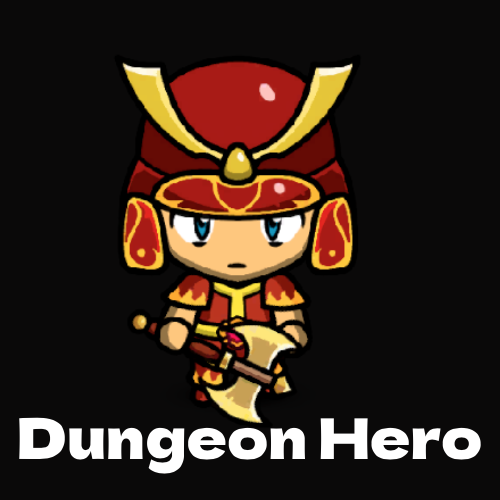
<style>
.page{position:relative;width:500px;height:500px;background:#0a0909}
.page>*{position:absolute;margin:0}
.t1{font:56px "DelaGothicOne-Regular";color:#ffffff}
</style>
<div class="page">
<p class="t1" style="left:19px;top:417px;width:462px;height:57px">Dungeon Hero</p>
</div>
